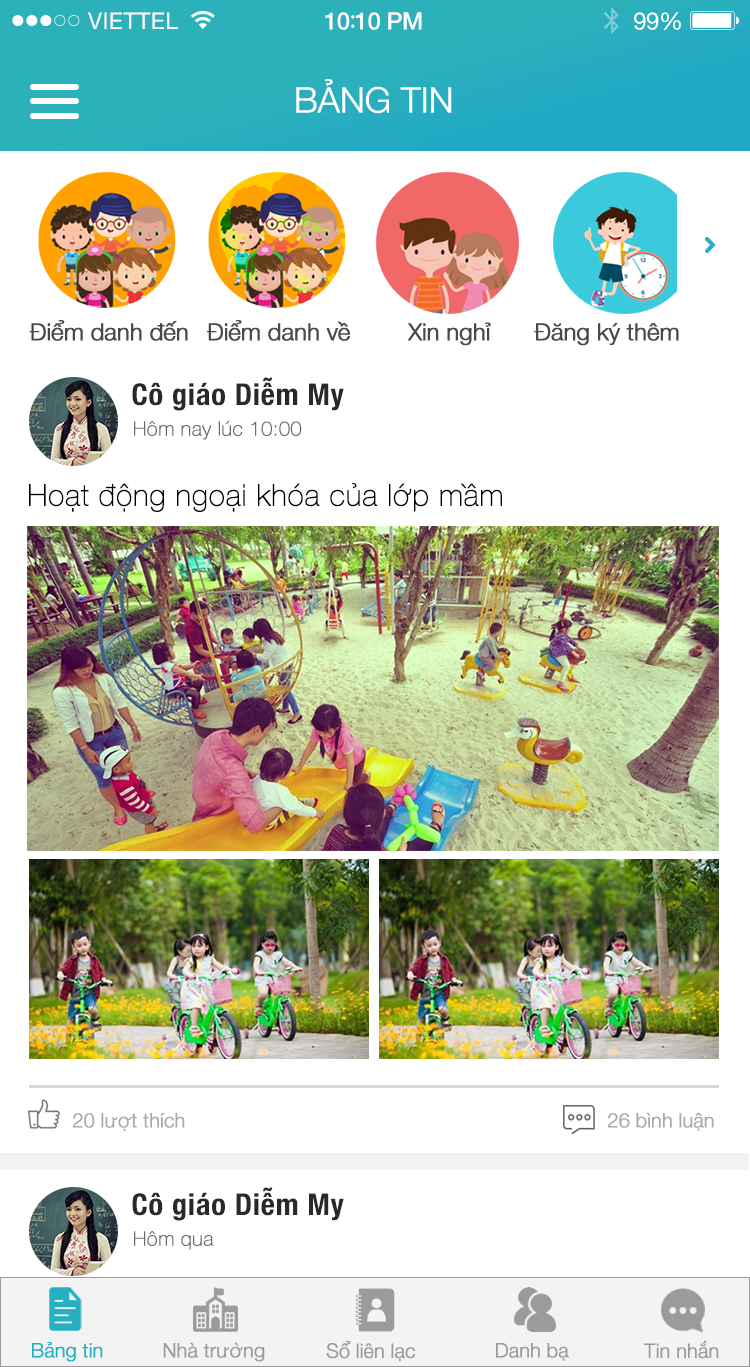
<style>
.page{position:relative;width:750px;height:1367px;background:#ffffff}
.page>*{position:absolute;margin:0}
.t1{font:23px "HelveticaNeue";letter-spacing:0.02em;color:#ffffff}
.t2{font:24px "HelveticaNeue-Medium";letter-spacing:-0.02em;color:#ffffff}
.t3{font:26px "MyriadPro-Regular";letter-spacing:-0.02em;color:#ffffff}
.t4{font:24px "HelveticaNeue";letter-spacing:-0.02em;color:#ffffff}
.t5{font:35px "HelveticaNeue-Light";letter-spacing:-0.02em;color:#ffffff;font-weight:bold}
.t6{font:23.7px "HelveticaNeue-Light";letter-spacing:-0.02em;color:#4a4a4a;font-weight:bold}
.t7{font:30px "HelveticaNeue-CondensedBold";letter-spacing:0.03em;color:#292929}
.t8{font:20px "HelveticaNeue-Thin";color:#6a6a6a;font-weight:bold}
.t9{font:30px "HelveticaNeue-Thin";color:#000000;font-weight:bold}
.t10{font:20px "HelveticaNeue-Light";letter-spacing:-0.02em;color:#a9a9a9;font-weight:bold}
.t11{font:20px "HelveticaNeue-Light";letter-spacing:-0.02em;color:#26afc2;font-weight:bold}
.t12{font:20px "HelveticaNeue-Light";letter-spacing:-0.02em;color:#9b9b9b;font-weight:bold}
</style>
<div class="page">
<p class="t1" style="left:88px;top:12px;width:90px;height:17px">VIETTEL</p>
<p class="t2" style="left:325px;top:12px;width:97px;height:18px">10<span class="t3">:</span>10 PM</p>
<p class="t4" style="left:634px;top:12px;width:47px;height:18px">99%</p>
<p class="t5" style="left:296px;top:79px;width:156px;height:35px">BẢNG TIN</p>
<p class="t6" style="left:29px;top:320px;width:159px;height:21px">Điểm danh đến</p>
<p class="t6" style="left:207px;top:320px;width:143px;height:21px">Điểm danh về</p>
<p class="t6" style="left:407px;top:322px;width:84px;height:24px">Xin nghỉ</p>
<p class="t6" style="left:534px;top:323px;width:145px;height:23px">Đăng ký thêm</p>
<p class="t7" style="left:132px;top:377px;width:212px;height:34px">Cô giáo Diễm My</p>
<p class="t8" style="left:134px;top:421px;width:168px;height:19px">Hôm nay lúc 10:00</p>
<p class="t9" style="left:29px;top:483px;width:473px;height:29px">Hoạt động ngoại khóa của lớp mầm</p>
<p class="t10" style="left:72px;top:1112px;width:113px;height:19px">20 lượt thích</p>
<p class="t10" style="left:607px;top:1112px;width:107px;height:19px">26 bình luận</p>
<p class="t7" style="left:132px;top:1187px;width:212px;height:34px">Cô giáo Diễm My</p>
<p class="t8" style="left:134px;top:1231px;width:80px;height:19px">Hôm qua</p>
<p class="t11" style="left:32px;top:1342px;width:71px;height:20px">Bảng tin</p>
<p class="t12" style="left:163px;top:1342px;width:102px;height:20px">Nhà trường</p>
<p class="t12" style="left:326px;top:1341px;width:90px;height:21px">Sổ liên lạc</p>
<p class="t12" style="left:496px;top:1343px;width:73px;height:18px">Danh bạ</p>
<p class="t12" style="left:643px;top:1340px;width:76px;height:19px">Tin nhắn</p>
</div>
